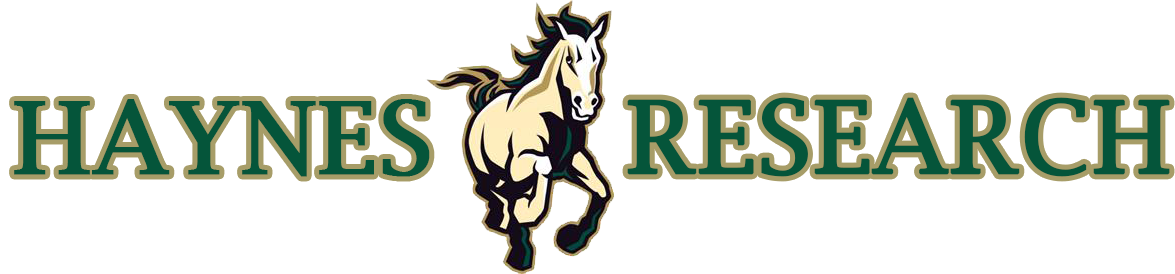
<style>
.page{position:relative;width:1175px;height:274px;background:#ffffff}
.page>*{position:absolute;margin:0}
.t1{font:100px "LucidaBright";color:#05553a;font-weight:bold}
.t2{font:99.8px "LucidaBright";color:#05553a;font-weight:bold}
</style>
<div class="page">
<p class="t1" style="left:14px;top:99px;width:416px;height:78px">HAYNES</p>
<p class="t2" style="left:627px;top:97px;width:543px;height:80px">RESEARCH</p>
</div>
